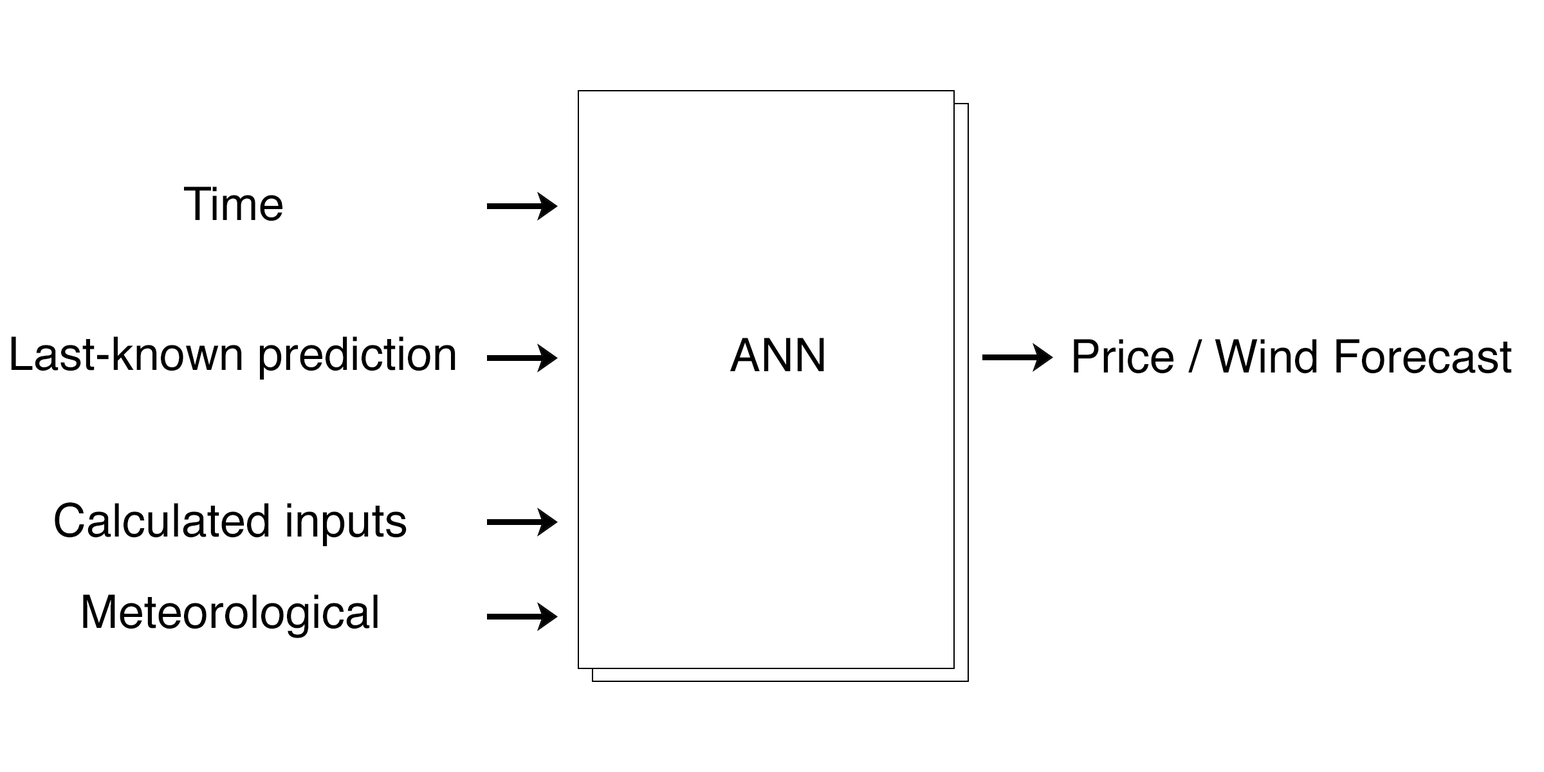
<style>
.page{position:relative;width:1544px;height:772px;background:#ffffff}
.page>*{position:absolute;margin:0}
.t1{font:46.3px "Helvetica";color:#000000}
</style>
<div class="page">
<p class="t1" style="left:184px;top:187px;width:98px;height:34px">Time</p>
<p class="t1" style="left:11px;top:337px;width:445px;height:43px">Last-known prediction</p>
<p class="t1" style="left:730px;top:338px;width:94px;height:33px">ANN</p>
<p class="t1" style="left:1074px;top:339px;width:438px;height:35px">Price / Wind Forecast</p>
<p class="t1" style="left:55px;top:503px;width:352px;height:43px">Calculated inputs</p>
<p class="t1" style="left:83px;top:595px;width:295px;height:43px">Meteorological</p>
</div>
